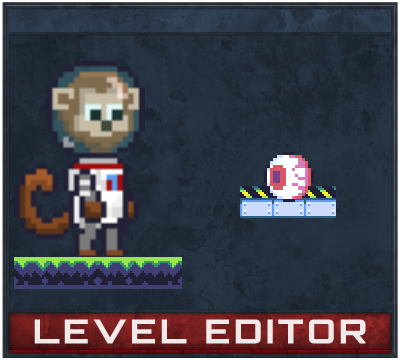
<style>
.page{position:relative;width:400px;height:360px}
.page>*{position:absolute;margin:0}
.t1{font:33.2px "Orbitron-Bold";letter-spacing:0.1em;color:#ffffff;font-weight:bold}
</style>
<div class="page">
<p class="t1" style="left:34px;top:319px;width:332px;height:25px;opacity:0.9">LEVEL EDITOR</p>
</div>
